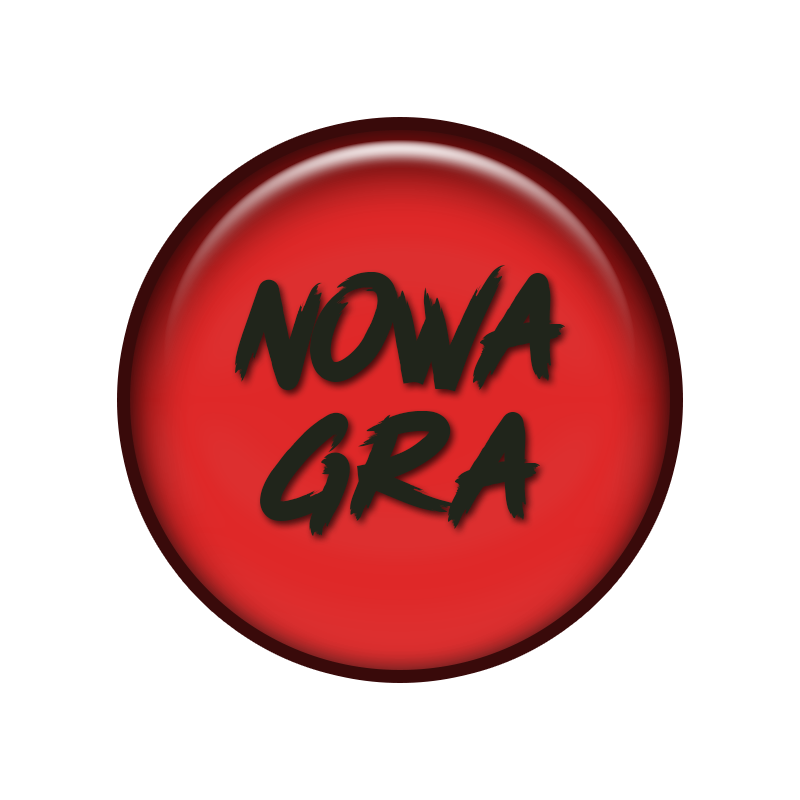
<style>
.page{position:relative;width:800px;height:800px;background:#ffffff}
.page>*{position:absolute;margin:0}
.t1{font:163.9px/138.9px "PinkBlue";color:#20251b}
</style>
<div class="page">
<p class="t1" style="left:235px;top:265px;width:330px;height:271px;text-align:center">nowa<br>gra</p>
</div>
